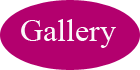
<style>
.page{position:relative;width:140px;height:70px;background:#b3006e}
.page>*{position:absolute;margin:0}
.t1{font:32px "TimesNewRomanPSMT";color:#faf7f9}
</style>
<div class="page">
<p class="t1" style="left:21px;top:19px;width:95px;height:29px">Gallery</p>
</div>
